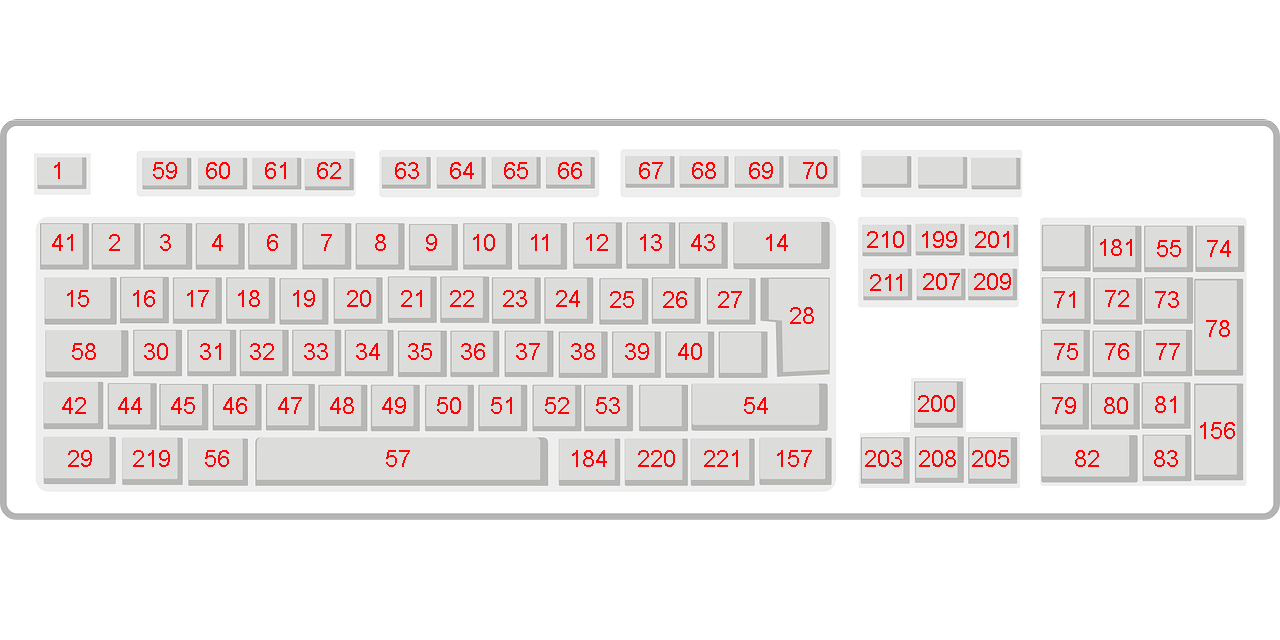
<style>
.page{position:relative;width:1280px;height:640px;background:#ffffff}
.page>*{position:absolute;margin:0}
.t1{font:24px "ArialMT";color:#ff0107}
</style>
<div class="page">
<p class="t1" style="left:54px;top:162px;width:6px;height:17px">1</p>
<p class="t1" style="left:153px;top:162px;width:24px;height:17px">59</p>
<p class="t1" style="left:206px;top:162px;width:24px;height:17px">60</p>
<p class="t1" style="left:265px;top:162px;width:21px;height:17px">61</p>
<p class="t1" style="left:317px;top:162px;width:24px;height:17px">62</p>
<p class="t1" style="left:395px;top:162px;width:24px;height:17px">63</p>
<p class="t1" style="left:450px;top:162px;width:24px;height:17px">64</p>
<p class="t1" style="left:504px;top:162px;width:24px;height:17px">65</p>
<p class="t1" style="left:558px;top:162px;width:24px;height:17px">66</p>
<p class="t1" style="left:639px;top:162px;width:24px;height:17px">67</p>
<p class="t1" style="left:692px;top:162px;width:24px;height:17px">68</p>
<p class="t1" style="left:749px;top:162px;width:24px;height:17px">69</p>
<p class="t1" style="left:803px;top:162px;width:24px;height:17px">70</p>
<p class="t1" style="left:867px;top:231px;width:37px;height:17px">210</p>
<p class="t1" style="left:922px;top:231px;width:35px;height:17px">199</p>
<p class="t1" style="left:975px;top:231px;width:34px;height:17px">201</p>
<p class="t1" style="left:52px;top:234px;width:21px;height:17px">41</p>
<p class="t1" style="left:109px;top:234px;width:11px;height:17px">2</p>
<p class="t1" style="left:160px;top:234px;width:11px;height:17px">3</p>
<p class="t1" style="left:212px;top:234px;width:11px;height:17px">4</p>
<p class="t1" style="left:267px;top:234px;width:11px;height:17px">6</p>
<p class="t1" style="left:321px;top:234px;width:11px;height:17px">7</p>
<p class="t1" style="left:375px;top:234px;width:11px;height:17px">8</p>
<p class="t1" style="left:426px;top:234px;width:11px;height:17px">9</p>
<p class="t1" style="left:473px;top:234px;width:22px;height:17px">10</p>
<p class="t1" style="left:531px;top:234px;width:17px;height:17px">11</p>
<p class="t1" style="left:586px;top:234px;width:22px;height:17px">12</p>
<p class="t1" style="left:640px;top:234px;width:22px;height:17px">13</p>
<p class="t1" style="left:691px;top:234px;width:24px;height:17px">43</p>
<p class="t1" style="left:766px;top:234px;width:22px;height:17px">14</p>
<p class="t1" style="left:1100px;top:239px;width:32px;height:17px">181</p>
<p class="t1" style="left:1157px;top:240px;width:24px;height:17px">55</p>
<p class="t1" style="left:1207px;top:240px;width:24px;height:17px">74</p>
<p class="t1" style="left:870px;top:274px;width:32px;height:17px">211</p>
<p class="t1" style="left:923px;top:273px;width:37px;height:17px">207</p>
<p class="t1" style="left:974px;top:273px;width:37px;height:17px">209</p>
<p class="t1" style="left:67px;top:290px;width:22px;height:17px">15</p>
<p class="t1" style="left:133px;top:290px;width:22px;height:17px">16</p>
<p class="t1" style="left:187px;top:290px;width:22px;height:17px">17</p>
<p class="t1" style="left:238px;top:290px;width:22px;height:17px">18</p>
<p class="t1" style="left:293px;top:290px;width:22px;height:17px">19</p>
<p class="t1" style="left:347px;top:290px;width:24px;height:17px">20</p>
<p class="t1" style="left:401px;top:290px;width:21px;height:17px">21</p>
<p class="t1" style="left:450px;top:290px;width:24px;height:17px">22</p>
<p class="t1" style="left:503px;top:290px;width:24px;height:17px">23</p>
<p class="t1" style="left:556px;top:290px;width:24px;height:17px">24</p>
<p class="t1" style="left:610px;top:291px;width:24px;height:17px">25</p>
<p class="t1" style="left:663px;top:291px;width:24px;height:17px">26</p>
<p class="t1" style="left:718px;top:291px;width:24px;height:17px">27</p>
<p class="t1" style="left:1054px;top:291px;width:21px;height:17px">71</p>
<p class="t1" style="left:1105px;top:290px;width:24px;height:17px">72</p>
<p class="t1" style="left:1155px;top:291px;width:24px;height:17px">73</p>
<p class="t1" style="left:790px;top:307px;width:24px;height:17px">28</p>
<p class="t1" style="left:1206px;top:320px;width:24px;height:17px">78</p>
<p class="t1" style="left:72px;top:343px;width:24px;height:17px">58</p>
<p class="t1" style="left:144px;top:343px;width:24px;height:17px">30</p>
<p class="t1" style="left:200px;top:343px;width:21px;height:17px">31</p>
<p class="t1" style="left:250px;top:343px;width:24px;height:17px">32</p>
<p class="t1" style="left:304px;top:343px;width:24px;height:17px">33</p>
<p class="t1" style="left:356px;top:343px;width:24px;height:17px">34</p>
<p class="t1" style="left:408px;top:343px;width:24px;height:17px">35</p>
<p class="t1" style="left:461px;top:343px;width:24px;height:17px">36</p>
<p class="t1" style="left:516px;top:343px;width:24px;height:17px">37</p>
<p class="t1" style="left:571px;top:343px;width:24px;height:17px">38</p>
<p class="t1" style="left:625px;top:343px;width:24px;height:17px">39</p>
<p class="t1" style="left:678px;top:343px;width:24px;height:17px">40</p>
<p class="t1" style="left:1054px;top:343px;width:24px;height:17px">75</p>
<p class="t1" style="left:1105px;top:343px;width:24px;height:17px">76</p>
<p class="t1" style="left:1156px;top:343px;width:24px;height:17px">77</p>
<p class="t1" style="left:62px;top:397px;width:24px;height:17px">42</p>
<p class="t1" style="left:118px;top:397px;width:24px;height:17px">44</p>
<p class="t1" style="left:171px;top:397px;width:24px;height:17px">45</p>
<p class="t1" style="left:223px;top:397px;width:24px;height:17px">46</p>
<p class="t1" style="left:278px;top:397px;width:24px;height:17px">47</p>
<p class="t1" style="left:330px;top:397px;width:24px;height:17px">48</p>
<p class="t1" style="left:382px;top:397px;width:24px;height:17px">49</p>
<p class="t1" style="left:437px;top:397px;width:24px;height:17px">50</p>
<p class="t1" style="left:491px;top:397px;width:21px;height:17px">51</p>
<p class="t1" style="left:545px;top:397px;width:24px;height:17px">52</p>
<p class="t1" style="left:596px;top:397px;width:24px;height:17px">53</p>
<p class="t1" style="left:744px;top:397px;width:24px;height:17px">54</p>
<p class="t1" style="left:918px;top:395px;width:37px;height:17px">200</p>
<p class="t1" style="left:1052px;top:397px;width:24px;height:17px">79</p>
<p class="t1" style="left:1104px;top:397px;width:24px;height:17px">80</p>
<p class="t1" style="left:1155px;top:396px;width:21px;height:17px">81</p>
<p class="t1" style="left:1200px;top:422px;width:35px;height:17px">156</p>
<p class="t1" style="left:68px;top:450px;width:24px;height:17px">29</p>
<p class="t1" style="left:133px;top:450px;width:37px;height:17px">219</p>
<p class="t1" style="left:205px;top:450px;width:24px;height:17px">56</p>
<p class="t1" style="left:386px;top:450px;width:24px;height:17px">57</p>
<p class="t1" style="left:572px;top:450px;width:35px;height:17px">184</p>
<p class="t1" style="left:638px;top:450px;width:37px;height:17px">220</p>
<p class="t1" style="left:704px;top:450px;width:34px;height:17px">221</p>
<p class="t1" style="left:777px;top:450px;width:35px;height:17px">157</p>
<p class="t1" style="left:865px;top:450px;width:37px;height:17px">203</p>
<p class="t1" style="left:919px;top:450px;width:37px;height:17px">208</p>
<p class="t1" style="left:972px;top:450px;width:37px;height:17px">205</p>
<p class="t1" style="left:1075px;top:450px;width:24px;height:17px">82</p>
<p class="t1" style="left:1154px;top:450px;width:24px;height:17px">83</p>
</div>
